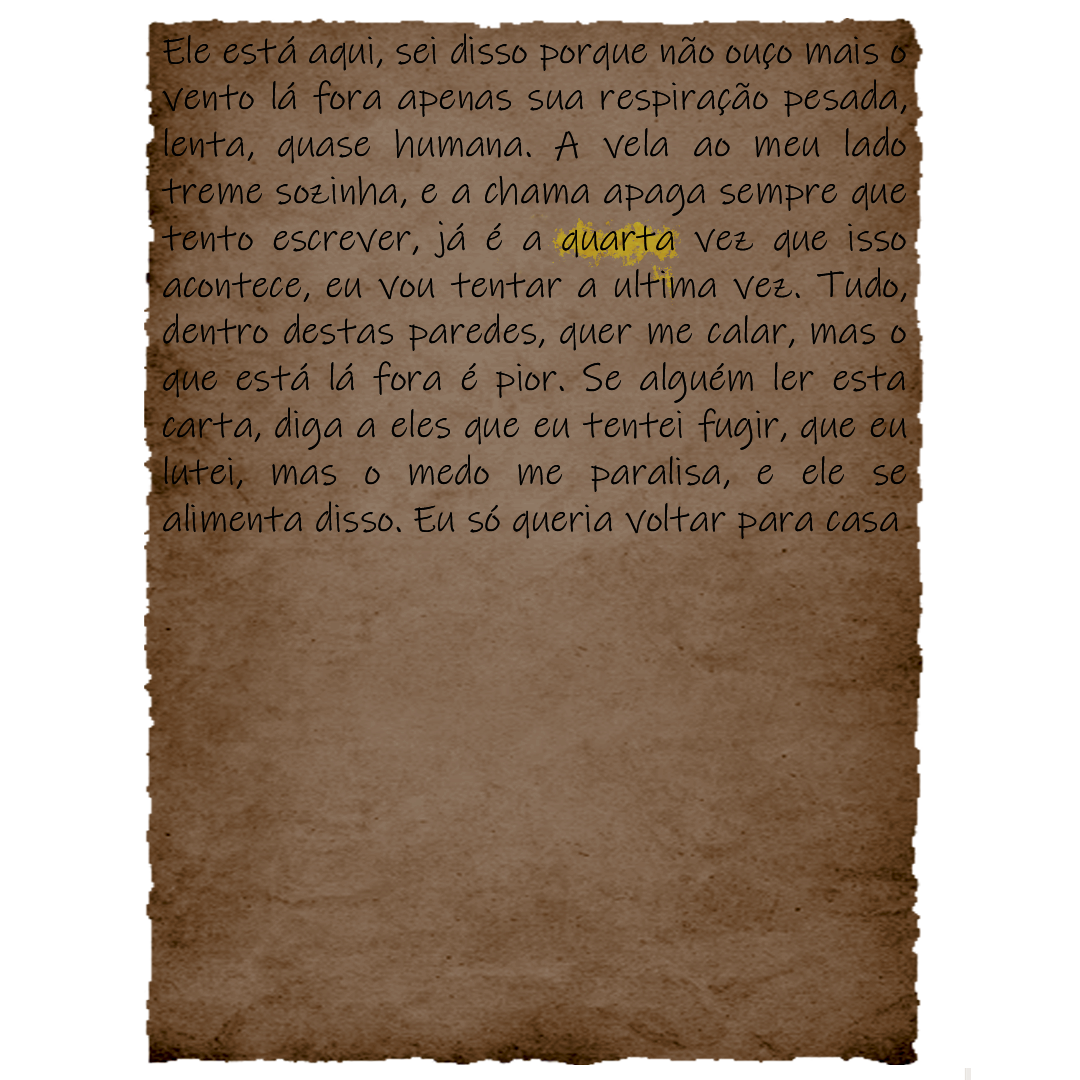
<style>
.page{position:relative;width:1080px;height:1080px;background:#ffffff}
.page>*{position:absolute;margin:0}
.t1{font:39px "InkFree";color:#000000}
</style>
<div class="page">
<p class="t1" style="left:162px;top:33px;width:745px;height:506px;text-align:justify">Ele está aqui, sei disso porque não ouço mais o vento lá fora apenas sua respiração pesada, lenta, quase humana. A vela ao meu lado treme sozinha, e a chama apaga sempre que tento escrever, já é a quarta vez que isso acontece, eu vou tentar a ultima vez. Tudo, dentro destas paredes, quer me calar, mas o que está lá fora é pior. Se alguém ler esta carta, diga a eles que eu tentei fugir, que eu lutei, mas o medo me paralisa, e ele se alimenta disso. Eu só queria voltar para casa</p>
</div>
